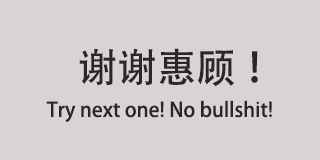
<style>
.page{position:relative;width:320px;height:160px;background:#d9d3d3}
.page>*{position:absolute;margin:0}
.t1{font:40.1px "AdobeHeitiStd-Regular";color:#282828}
.t2{font:20px "AdobeHeitiStd-Regular";color:#282828}
</style>
<div class="page">
<p class="t1" style="left:79px;top:48px;width:179px;height:38px">谢谢惠顾 ！</p>
<p class="t2" style="left:46px;top:100px;width:226px;height:22px">Try next one! No bullshit!</p>
</div>
